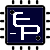
<style>
.page{position:relative;width:50px;height:50px;background:#020232}
.page>*{position:absolute;margin:0}
.t1{font:21px "Neuropol-Regular";color:#ffffff}
</style>
<div class="page">
<p class="t1" style="left:13px;top:12px;width:17px;height:15px">E</p>
<p class="t1" style="left:21px;top:25px;width:19px;height:15px">P</p>
</div>
